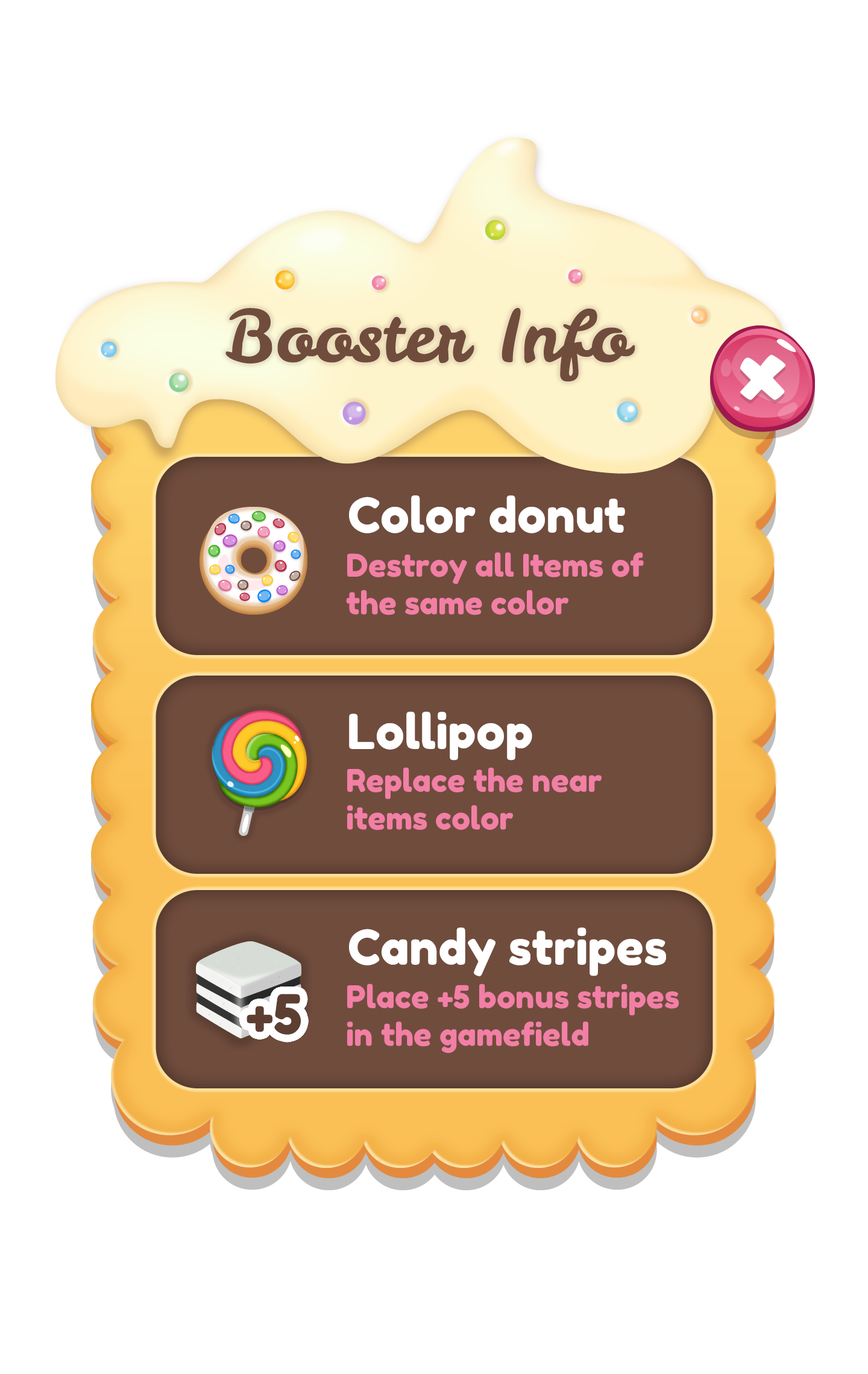
<style>
.page{position:relative;width:868px;height:1374px;background:#ffffff}
.page>*{position:absolute;margin:0}
.t1{font:71.4px "LeckerliOne-Regular";color:#704c3d}
.t2{font:48.2px "FredokaOne-Regular";color:#ffffff}
.t3{font:31.3px/37.6px "FredokaOne-Regular";color:#f27fa5}
.t4{font:54.1px "FredokaOne-Regular";color:#5d3f32}
</style>
<div class="page">
<p class="t1" style="left:225px;top:308px;width:410px;height:73px">Booster Info</p>
<p class="t2" style="left:349px;top:495px;width:276px;height:38px">Color donut</p>
<p class="t3" style="left:346px;top:552px;width:298px;height:63px">Destroy all Items of <br>the same color</p>
<p class="t2" style="left:349px;top:712px;width:183px;height:49px">Lollipop</p>
<p class="t3" style="left:347px;top:767px;width:254px;height:63px">Replace the near<br>items color</p>
<p class="t2" style="left:349px;top:927px;width:317px;height:49px">Candy stripes</p>
<p class="t3" style="left:347px;top:984px;width:332px;height:69px">Place +5 bonus stripes <br>in the gamefield</p>
<p class="t4" style="left:246px;top:994px;width:55px;height:41px">+5</p>
</div>
